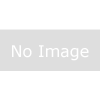
<style>
.page{position:relative;width:100px;height:100px;background:#ffffff}
.page>*{position:absolute;margin:0}
.t1{font:16px "Verdana";color:#ffffff}
</style>
<div class="page">
<p class="t1" style="left:12px;top:45px;width:77px;height:16px">No Image</p>
</div>
